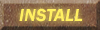
<style>
.page{position:relative;width:100px;height:30px}
.page>*{position:absolute;margin:0}
.t1{font:18px "FranklinGothic-DemiItalic";color:#fff061}
</style>
<div class="page">
<p class="t1" style="left:19px;top:8px;width:64px;height:14px">INSTALL</p>
</div>
